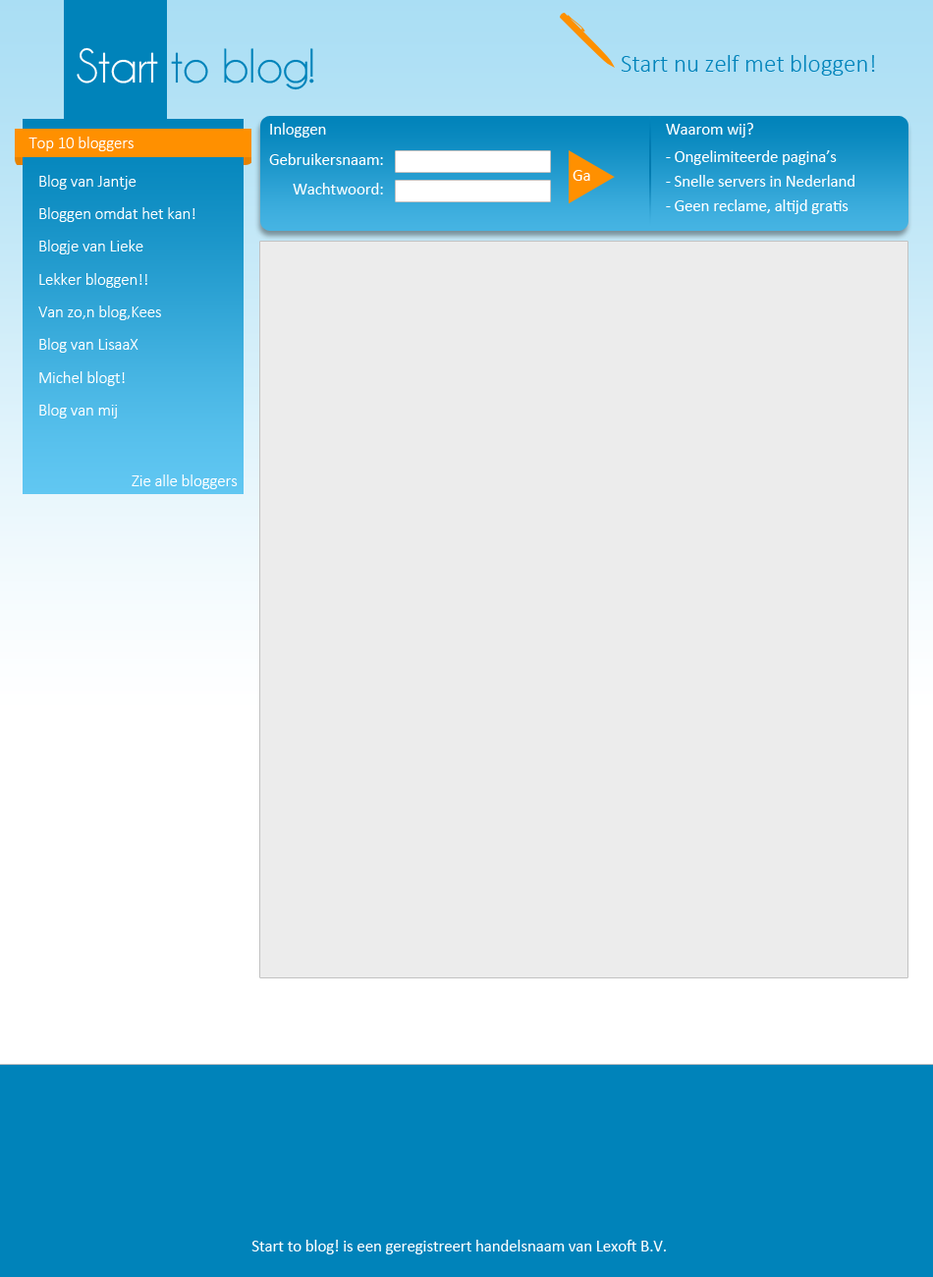
<style>
.page{position:relative;width:933px;height:1277px;background:#ececec}
.page>*{position:absolute;margin:0}
.t1{font:49.1px "Champagne&Limousines";color:#ffffff}
.t2{font:49.1px "Champagne&Limousines";color:#0083ba}
.t3{font:24.6px "Calibri-Light";color:#0083ba}
.t4{font:16.4px "Calibri";color:#ffffff}
.t5{font:16.4px "Calibri-Light";color:#ffffff}
.t6{font:16.4px/24.6px "Calibri";color:#ffffff}
.t7{font:16.4px/32.8px "Calibri-Light";color:#ffffff}
</style>
<div class="page">
<p class="t1" style="left:77px;top:47px;width:81px;height:37px">Start</p>
<p class="t2" style="left:171px;top:48px;width:143px;height:42px">to blog!</p>
<p class="t3" style="left:621px;top:55px;width:255px;height:21px">Start nu zelf met bloggen!</p>
<p class="t4" style="left:270px;top:123px;width:56px;height:15px">Inloggen</p>
<p class="t4" style="left:666px;top:123px;width:88px;height:15px">Waarom wij?</p>
<p class="t5" style="left:28px;top:137px;width:106px;height:14px">Top 10 bloggers</p>
<p class="t4" style="left:269px;top:153px;width:114px;height:12px">Gebruikersnaam:</p>
<p class="t6" style="left:666px;top:150px;width:189px;height:64px">- Ongelimiteerde pagina’s<br>- Snelle servers in Nederland<br>- Geen reclame, altijd gratis</p>
<p class="t4" style="left:573px;top:170px;width:18px;height:11px">Ga</p>
<p class="t7" style="left:38px;top:175px;width:158px;height:244px">Blog van Jantje<br>Bloggen omdat het kan!<br>Blogje van Lieke<br>Lekker bloggen!!<br>Van zo,n blog,Kees<br>Blog van LisaaX<br>Michel blogt!<br>Blog van mij</p>
<p class="t4" style="left:293px;top:183px;width:90px;height:12px">Wachtwoord:</p>
<p class="t5" style="left:132px;top:475px;width:106px;height:14px">Zie alle bloggers</p>
<p class="t4" style="left:252px;top:1240px;width:414px;height:15px">Start to blog! is een geregistreert handelsnaam van Lexoft B.V.</p>
</div>
